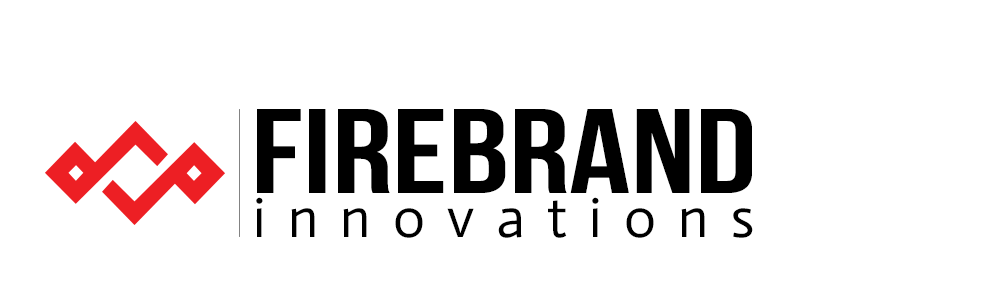
<style>
.page{position:relative;width:1000px;height:300px;background:#ffffff}
.page>*{position:absolute;margin:0}
.t1{font:120px "BebasNeue";color:#000000;scale:1.25 1}
.t2{font:56.2px "Actor-Regular";letter-spacing:0.403em;color:#000000}
</style>
<div class="page">
<p class="t1" style="left:257px;top:109px;width:495px;height:84px">Firebrand</p>
<p class="t2" style="left:256px;top:197px;width:497px;height:41px">innovations</p>
</div>
